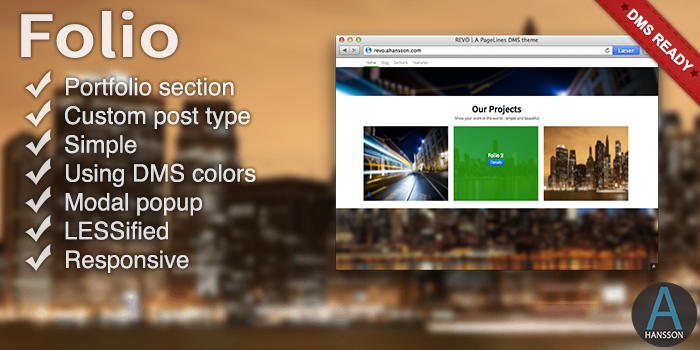
<style>
.page{position:relative;width:700px;height:350px}
.page>*{position:absolute;margin:0}
.t1{font:65px "SourceSansPro-Semibold";color:#f2eae3;scale:1.2 1}
.t2{font:14px "Arial-BoldMT";color:#ffffff;text-transform:uppercase}
.t3{font:24px "Helvetica";color:#e3e1e0}
</style>
<div class="page">
<p class="t1" style="left:21px;top:10px;width:157px;height:48px">Folio</p>
<p class="t2" style="left:626px;top:8px;width:68px;height:63px;rotate:44deg">DMS Ready</p>
<p class="t3" style="left:65px;top:77px;width:191px;height:196px">Portfolio section<br>Custom post type<br>Simple<br>Using DMS colors<br>Modal popup<br>LESSified<br>Responsive</p>
</div>
